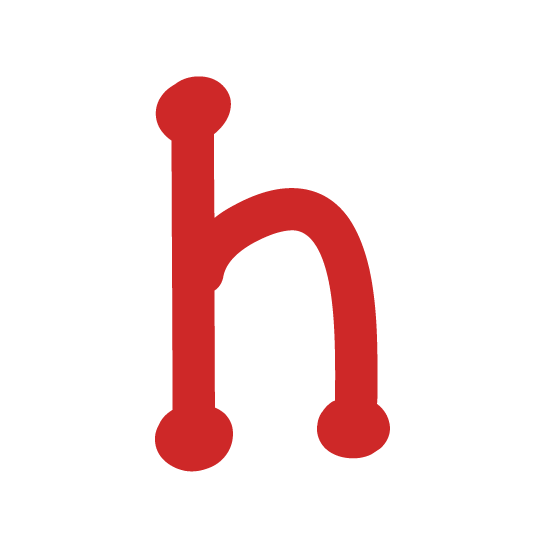
<style>
.page{position:relative;width:547px;height:546px;background:#ffffff}
.page>*{position:absolute;margin:0}
.t1{font:463.3px "GelDoticaLowerCaseThick";color:#ce2828}
</style>
<div class="page">
<p class="t1" style="left:155px;top:76px;width:235px;height:396px">h</p>
</div>
